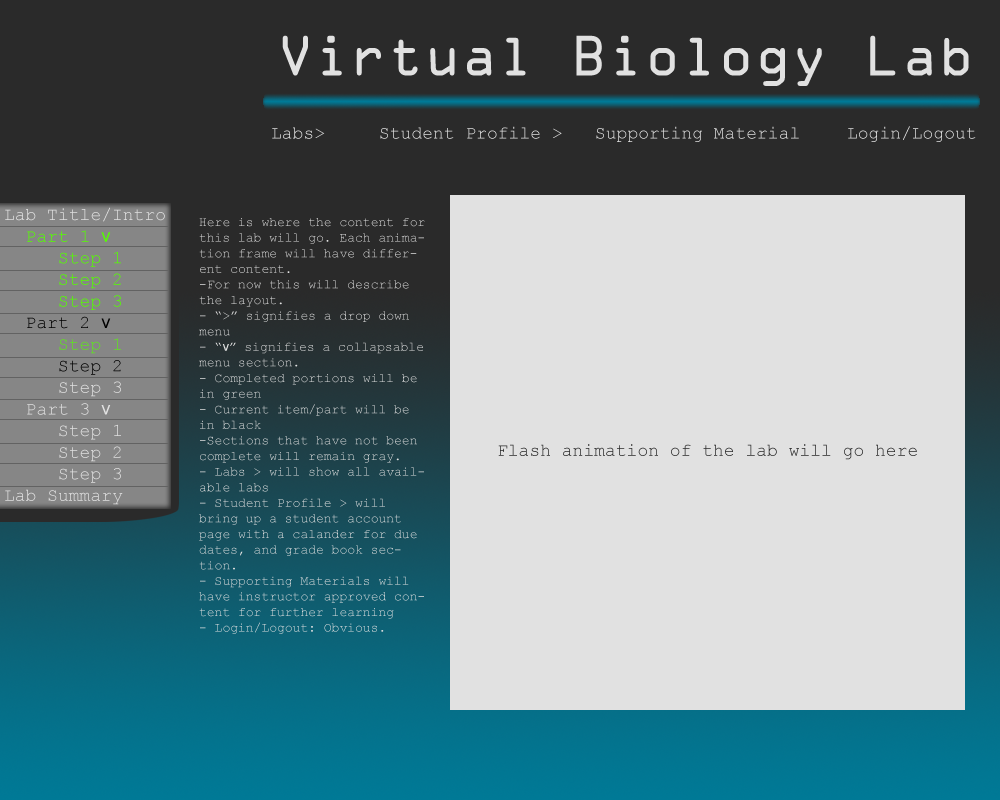
<style>
.page{position:relative;width:1000px;height:800px;background:#e1e1e1}
.page>*{position:absolute;margin:0}
.t1{font:51px "OCRAStd";color:#e1e1e1}
.t2{font:18px "CourierNewPSMT";color:#e1e1e1}
.t3{font:18px "CourierNewPSMT";color:#54ff00}
.t4{font:18px "ArialMT";color:#54ff00}
.t5{font:18px "CourierNewPSMT";color:#000000}
.t6{font:18px "ArialMT";color:#000000}
.t7{font:18px "CourierNewPSMT";color:#61e122}
.t8{font:18px "ArialMT";color:#e1e1e1}
.t9{font:13px "CourierNewPSMT";color:#e1e1e1}
.t10{font:13px "ArialMT";color:#e1e1e1}
.t11{font:18px "CourierNewPSMT";color:#2a2a2a}
</style>
<div class="page">
<p class="t1" style="left:282px;top:35px;width:687px;height:51px">Virtual Biology Lab</p>
<p class="t2" style="left:272px;top:126px;width:704px;height:16px">Labs&gt;  Student Profile &gt; Supporting Material  Login/Logout</p>
<p class="t2" style="left:5px;top:207px;width:160px;height:298px">Lab Title/Intro<br>  <span class="t3">Part 1 </span><span class="t4">v<br></span><span class="t3">     Step 1<br>     Step 2<br>     Step 3<br>  </span><span class="t5">Part 2 </span><span class="t6">v<br>     </span><span class="t7">Step 1<br>     </span><span class="t5">Step 2<br></span>     Step 3<br>  Part 3 <span class="t8">v<br></span>     Step 1<br>     Step 2<br>     Step 3<br>Lab Summary</p>
<p class="t9" style="left:199px;top:218px;width:226px;height:416px">Here is where the content for this lab will go. Each animation frame will have different content.<br>-For now this will describe the layout.<br>- “&gt;” signifies a drop down menu<br>- “<span class="t10">v</span>” signifies a collapsable menu section.<br>- Completed portions will be in green<br>- Current item/part will be in black<br>-Sections that have not been complete will remain gray.<br>- Labs &gt; will show all available labs<br>- Student Profile &gt; will bring up a student account page with a calander for due dates, and grade book section.<br>- Supporting Materials will have instructor approved content for further learning<br>- Login/Logout: Obvious.</p>
<p class="t11" style="left:498px;top:444px;width:419px;height:16px">Flash animation of the lab will go here</p>
</div>
